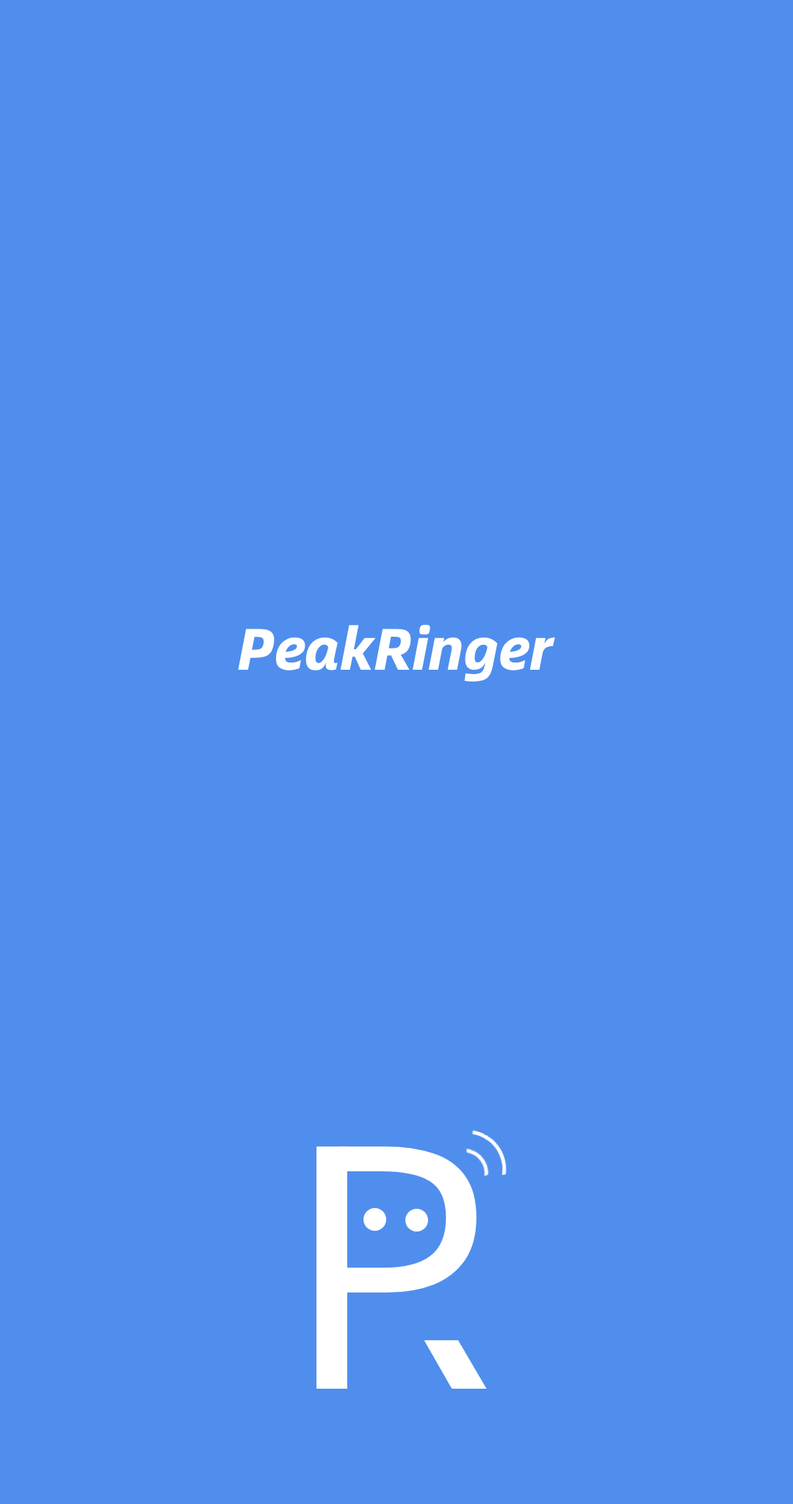
<style>
.page{position:relative;width:793px;height:1504px;background:#4f8eed}
.page>*{position:absolute;margin:0}
.t1{font:58.7px "AlibabaSans-HeavyItalic";color:#ffffff}
</style>
<div class="page">
<p class="t1" style="left:238px;top:624px;width:317px;height:57px">PeakRinger</p>
</div>
